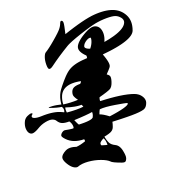
<style>
.page{position:relative;width:180px;height:180px;background:#ffffff}
.page>*{position:absolute;margin:0}
.t1{font:178.7px "STXingkai";color:#000000}
</style>
<div class="page">
<p class="t1" style="left:24px;top:10px;width:123px;height:158px">墨</p>
</div>
